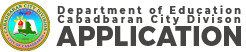
<style>
.page{position:relative;width:246px;height:52px;background:#ffffff}
.page>*{position:absolute;margin:0}
.t1{font:9.5px "Montserrat-ExtraBold";letter-spacing:0.26em;color:#474544}
.t2{font:9.5px "Montserrat-ExtraBold";letter-spacing:0.28em;color:#474544}
.t3{font:27.9px "Montserrat-ExtraBold";letter-spacing:0.02em;color:#474544;scale:0.93 1}
</style>
<div class="page">
<p class="t1" style="left:57px;top:5px;width:184px;height:11px">Department of Education</p>
<p class="t2" style="left:57px;top:14px;width:184px;height:11px">Cabadbaran City Divison</p>
<p class="t3" style="left:56px;top:26px;width:185px;height:20px">APPLICATION</p>
</div>
